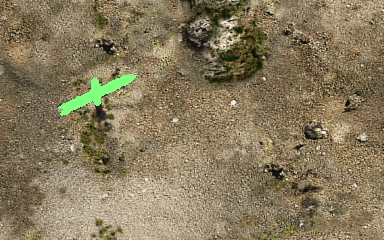
<style>
.page{position:relative;width:384px;height:240px}
.page>*{position:absolute;margin:0}
.t1{font:8px "HerculanumLTW01-Bold";color:#80ff80;scale:0.83 1}
</style>
<div class="page">
<p class="t1" style="left:71px;top:79px;width:56px;height:32px;rotate:-26deg">Zum Mobilin Kopf</p>
</div>
